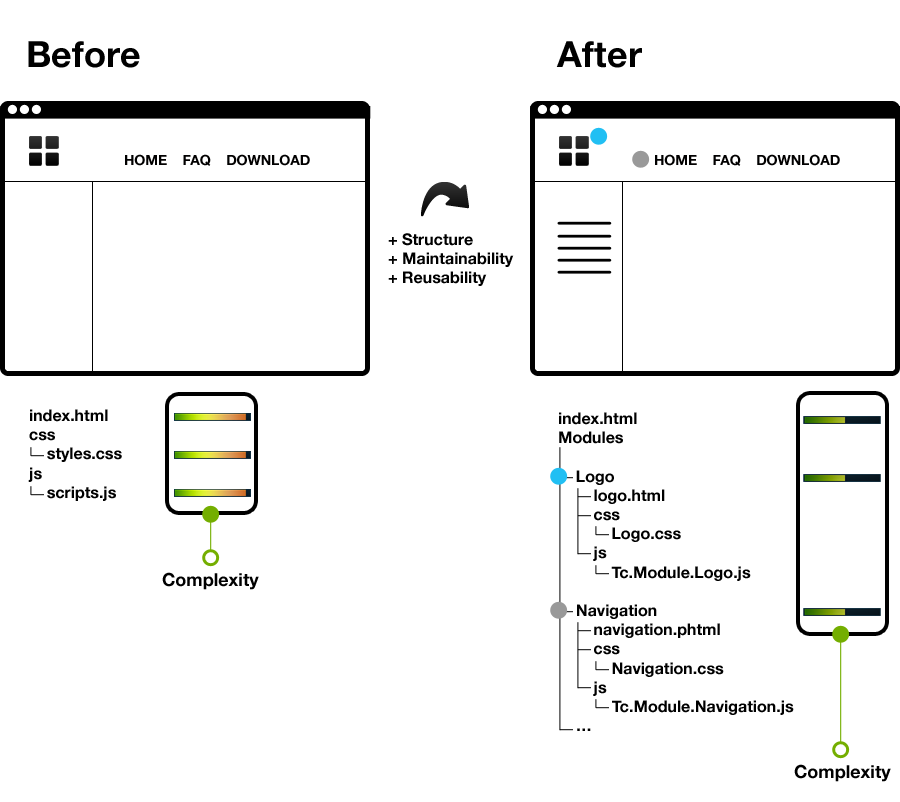
<style>
.page{position:relative;width:900px;height:802px;background:#ffffff}
.page>*{position:absolute;margin:0}
.t1{font:36px "HelveticaNeue-Bold";color:#000000}
.t2{font:14px "HelveticaNeue-Bold";color:#010000}
.t3{font:16px "HelveticaNeue-Bold";color:#000000}
.t4{font:18px "HelveticaNeue-Bold";color:#000000}
</style>
<div class="page">
<p class="t1" style="left:28px;top:41px;width:614px;height:27px">Before              After</p>
<p class="t2" style="left:125px;top:154px;width:185px;height:12px">HOME    FAQ    DOWNLOAD</p>
<p class="t2" style="left:655px;top:154px;width:185px;height:12px">HOME    FAQ    DOWNLOAD</p>
<p class="t3" style="left:388px;top:233px;width:126px;height:53px">+ Structure<br>+ Maintainability<br>+ Reusability</p>
<p class="t3" style="left:28px;top:409px;width:94px;height:92px">index.html<br>css<br>    styles.css<br>js<br>    scripts.js</p>
<p class="t3" style="left:559px;top:412px;width:235px;height:319px">index.html<br>Modules<br><br>    Logo<br>        logo.html<br>        css<br>            Logo.css<br>        js<br>            Tc.Module.Logo.js<br><br>    Navigation<br>        navigation.phtml<br>        css<br>            Navigation.css<br>        js<br>     Tc.Module.Navigation.js<br>    …</p>
<p class="t4" style="left:162px;top:572px;width:97px;height:18px">Complexity</p>
<p class="t4" style="left:794px;top:764px;width:97px;height:18px">Complexity</p>
</div>
